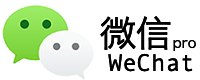
<style>
.page{position:relative;width:200px;height:80px;background:#ffffff}
.page>*{position:absolute;margin:0}
.t1{font:36px "HiraginoSansGB-W3";color:#000000}
.t2{font:14px "HiraginoSansGB-W3";color:#000000}
.t3{font:24px "AndaleMono";color:#000000}
</style>
<div class="page">
<p class="t1" style="left:100px;top:16px;width:71px;height:34px">微信</p>
<p class="t2" style="left:173px;top:40px;width:23px;height:11px">pro</p>
<p class="t3" style="left:108px;top:53px;width:85px;height:19px">WeChat</p>
</div>
